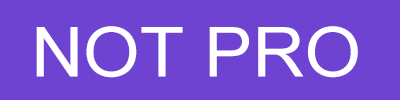
<style>
.page{position:relative;width:400px;height:100px;background:#6f43d1}
.page>*{position:absolute;margin:0}
.t1{font:69px "ArialMT";color:#ffffff;scale:1.05 1}
</style>
<div class="page">
<p class="t1" style="left:36px;top:26px;width:322px;height:52px">NOT PRO</p>
</div>
